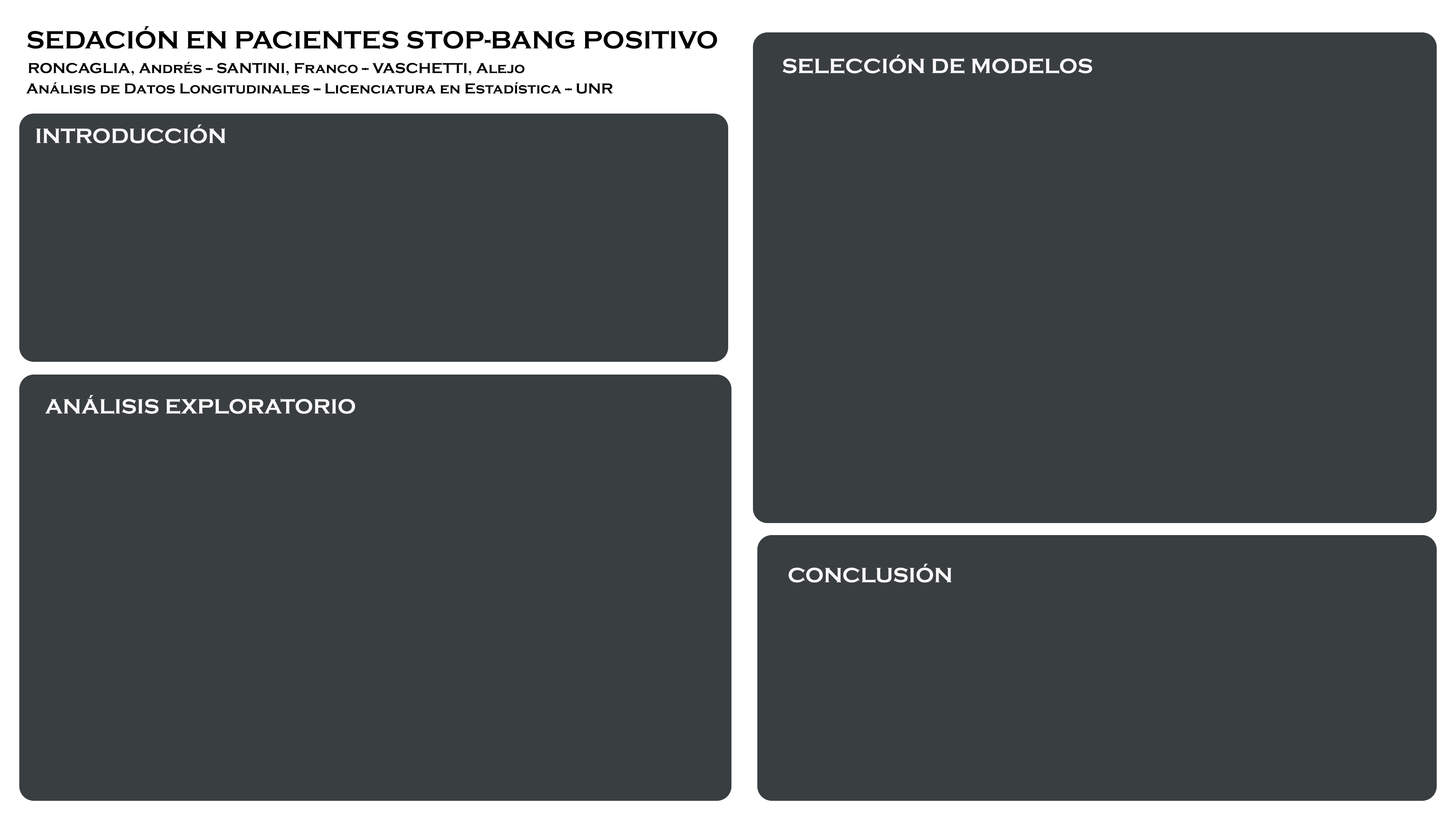
<style>
.page{position:relative;width:1456px;height:819px;background:#393e41}
.page>*{position:absolute;margin:0}
.t1{font:25.8px "CopperplateGothic-Bold";color:#000000}
.t2{font:15px "CopperplateGothic-Bold";color:#000000}
.t3{font:21.5px "CopperplateGothic-Bold";color:#f9f7f7}
</style>
<div class="page">
<p class="t1" style="left:27px;top:26px;width:690px;height:24px">SEDACIÓN EN PACIENTES STOP-BANG POSITIVO</p>
<p class="t2" style="left:28px;top:62px;width:497px;height:13px">RONCAGLIA, Andrés -- SANTINI, Franco -- VASCHETTI, Alejo</p>
<p class="t3" style="left:782px;top:55px;width:310px;height:19px">SELECCIÓN DE MODELOS</p>
<p class="t2" style="left:26px;top:82px;width:587px;height:12px">Análisis de Datos Longitudinales -- Licenciatura en Estadística -- UNR</p>
<p class="t3" style="left:36px;top:125px;width:189px;height:18px">INTRODUCCIÓN</p>
<p class="t3" style="left:45px;top:395px;width:310px;height:19px">ANÁLISIS EXPLORATORIO</p>
<p class="t3" style="left:789px;top:564px;width:162px;height:19px">CONCLUSIÓN</p>
</div>
